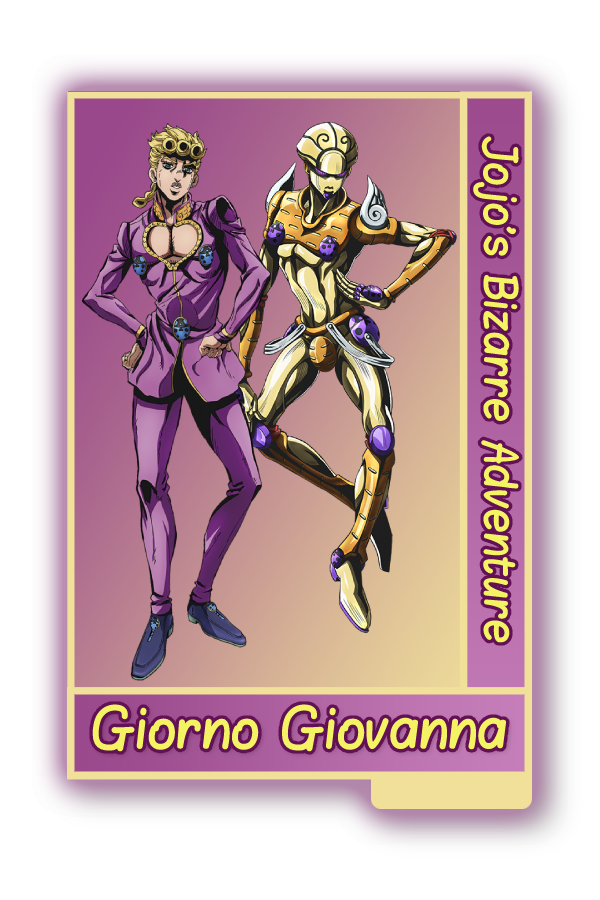
<style>
.page{position:relative;width:600px;height:900px}
.page>*{position:absolute;margin:0}
.t1{font:35px "Blokletters-Viltstift";color:#f3f363}
.t2{font:43px "Blokletters-Viltstift";color:#f3f363}
</style>
<div class="page">
<p class="t1" style="left:473px;top:136px;width:47px;height:507px;rotate:90deg">Jojo's Bizarre Adventure</p>
<p class="t2" style="left:92px;top:704px;width:415px;height:48px">Giorno Giovanna</p>
</div>
